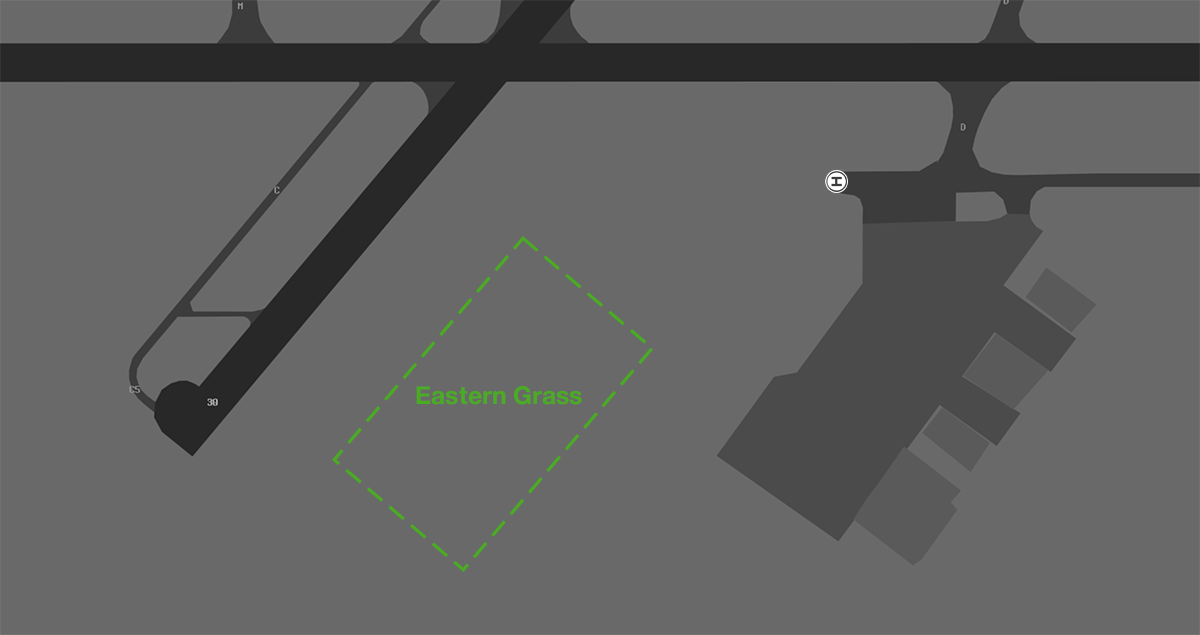
<style>
.page{position:relative;width:1200px;height:635px;background:#696969}
.page>*{position:absolute;margin:0}
.t1{font:24.8px "HelveticaNeue-Bold";color:#49ac22}
</style>
<div class="page">
<p class="t1" style="left:416px;top:386px;width:166px;height:19px">Eastern Grass</p>
</div>
